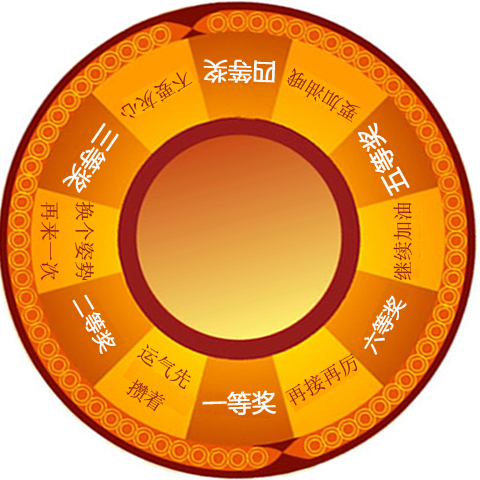
<style>
.page{position:relative;width:480px;height:480px}
.page>*{position:absolute;margin:0}
.t1{font:24px "MicrosoftYaHei";color:#f9f8f8;font-weight:bold}
.t2{font:20px "SimSun";color:#941d19}
.t3{font:20px "MicrosoftYaHei";color:#f9f8f8;font-weight:bold}
</style>
<div class="page">
<p class="t1" style="left:203px;top:59px;width:73px;height:25px;rotate:-178deg">四等奖</p>
<p class="t2" style="left:121px;top:72px;width:72px;height:46px;rotate:149deg">不要灰心</p>
<p class="t2" style="left:287px;top:67px;width:74px;height:55px;rotate:-149deg">要加油哦</p>
<p class="t1" style="left:62px;top:123px;width:57px;height:70px;rotate:124deg">三等奖</p>
<p class="t1" style="left:357px;top:122px;width:53px;height:74px;rotate:-119deg">五等奖</p>
<p class="t2" style="left:40px;top:202px;width:54px;height:79px;rotate:90deg">换个姿势<br>再来一次</p>
<p class="t2" style="left:393px;top:202px;width:19px;height:78px;rotate:-90deg">继续加油</p>
<p class="t3" style="left:72px;top:294px;width:44px;height:60px;rotate:60deg">二等奖</p>
<p class="t3" style="left:364px;top:295px;width:43px;height:60px;rotate:-60deg">六等奖</p>
<p class="t2" style="left:126px;top:344px;width:65px;height:68px;rotate:33deg">运气先<br> 攒着</p>
<p class="t2" style="left:285px;top:353px;width:73px;height:53px;rotate:-29deg">再接再厉</p>
<p class="t1" style="left:202px;top:390px;width:75px;height:25px;rotate:-2deg">一等奖</p>
</div>
